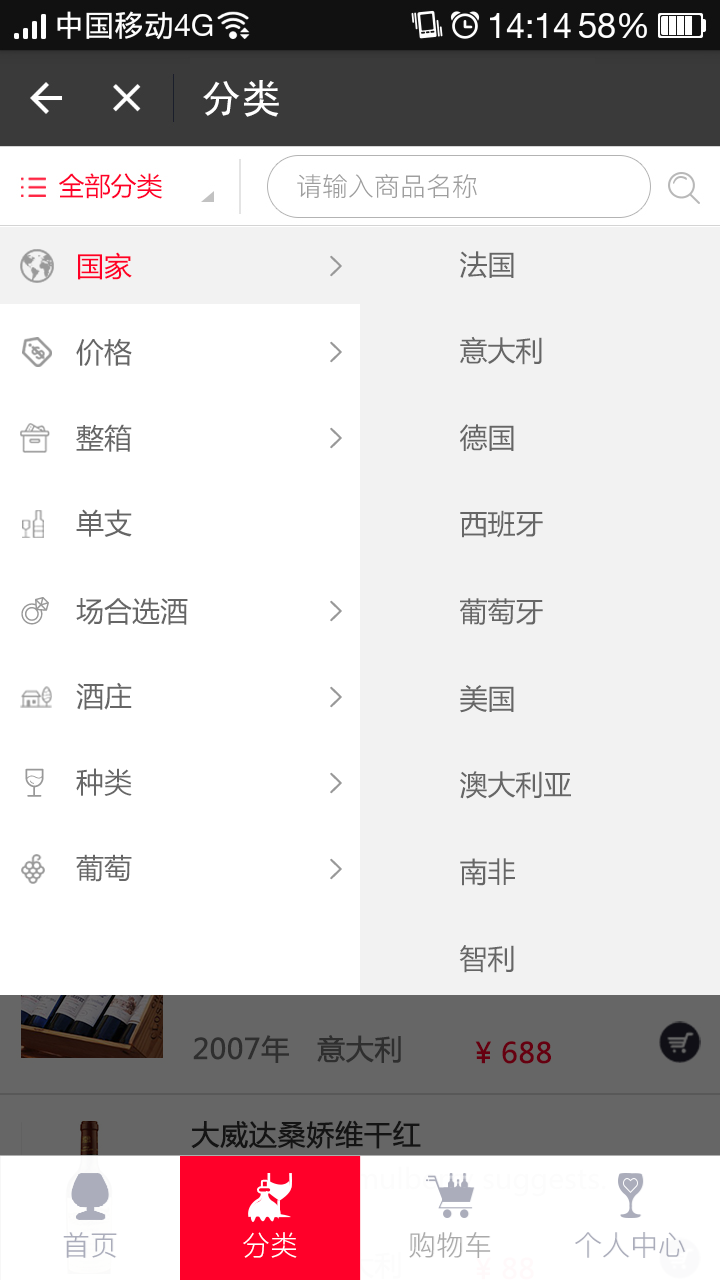
<style>
.page{position:relative;width:720px;height:1280px;background:#ffffff}
.page>*{position:absolute;margin:0}
.t1{font:28px "MicrosoftYaHei";color:#ff0026}
.t2{font:28px "MicrosoftYaHei";color:#666666}
.t3{font:28px "PingFang-SC-Regular";color:#abadbb;text-transform:uppercase}
.t4{font:28px "PingFang-SC-Regular";color:#ffffff;text-transform:uppercase}
.t5{font:28px "PingFang-SC-Regular";color:#a9a9a9;text-transform:uppercase}
</style>
<div class="page">
<p class="t1" style="left:78px;top:252px;width:54px;height:28px">国家</p>
<p class="t2" style="left:460px;top:251px;width:54px;height:27px">法国</p>
<p class="t2" style="left:76px;top:338px;width:56px;height:28px">价格</p>
<p class="t2" style="left:460px;top:336px;width:82px;height:29px">意大利</p>
<p class="t2" style="left:76px;top:424px;width:56px;height:28px">整箱</p>
<p class="t2" style="left:460px;top:424px;width:54px;height:27px">德国</p>
<p class="t2" style="left:76px;top:509px;width:56px;height:28px">单支</p>
<p class="t2" style="left:460px;top:510px;width:83px;height:28px">西班牙</p>
<p class="t2" style="left:76px;top:597px;width:112px;height:28px">场合选酒</p>
<p class="t2" style="left:460px;top:598px;width:83px;height:27px">葡萄牙</p>
<p class="t2" style="left:76px;top:682px;width:56px;height:28px">酒庄</p>
<p class="t2" style="left:460px;top:685px;width:54px;height:28px">美国</p>
<p class="t2" style="left:76px;top:768px;width:56px;height:28px">种类</p>
<p class="t2" style="left:460px;top:771px;width:111px;height:28px">澳大利亚</p>
<p class="t2" style="left:76px;top:854px;width:56px;height:28px">葡萄</p>
<p class="t2" style="left:460px;top:858px;width:55px;height:28px">南非</p>
<p class="t2" style="left:459px;top:945px;width:55px;height:28px">智利</p>
<p class="t3" style="left:63px;top:1232px;width:54px;height:26px">首页</p>
<p class="t4" style="left:243px;top:1232px;width:54px;height:26px">分类</p>
<p class="t5" style="left:409px;top:1232px;width:81px;height:26px">购物车</p>
<p class="t3" style="left:575px;top:1232px;width:110px;height:26px">个人中心</p>
</div>
